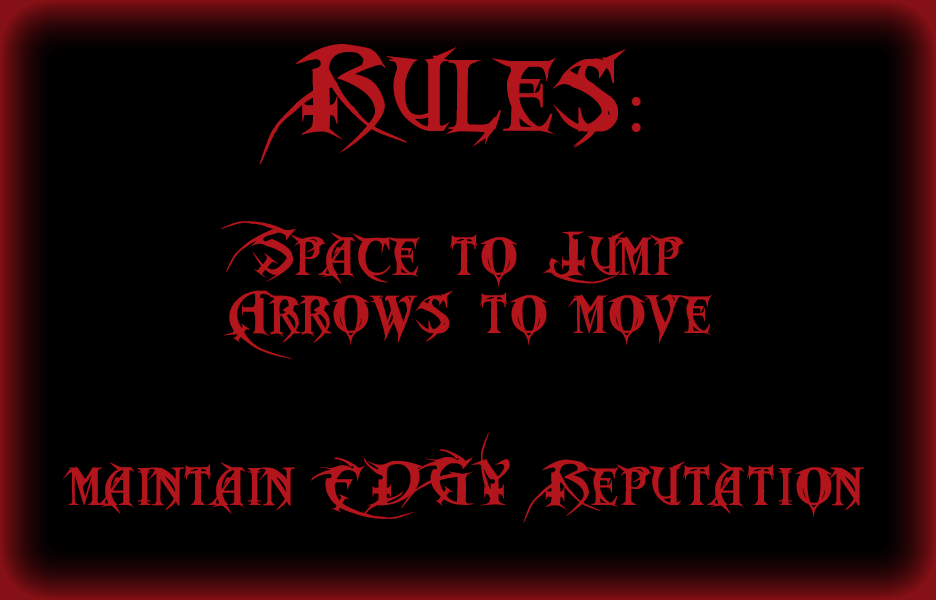
<style>
.page{position:relative;width:936px;height:600px;background:#000000}
.page>*{position:absolute;margin:0}
.t1{font:48px "MetalMacabre";color:#b2151c}
.t2{font:92px "MetalMacabre";color:#b2151c}
.t3{font:72px "MyriadPro-Regular";color:#b2151c}
</style>
<div class="page">
<p class="t1" style="left:62px;top:44px;width:802px;height:479px;text-align:center"><span class="t2">Rules</span><span class="t3">:<br><br><br></span>Space  to  Jump<br>Arrows  to  move<br><br><br>maintain  EDGY  Reputation</p>
</div>
